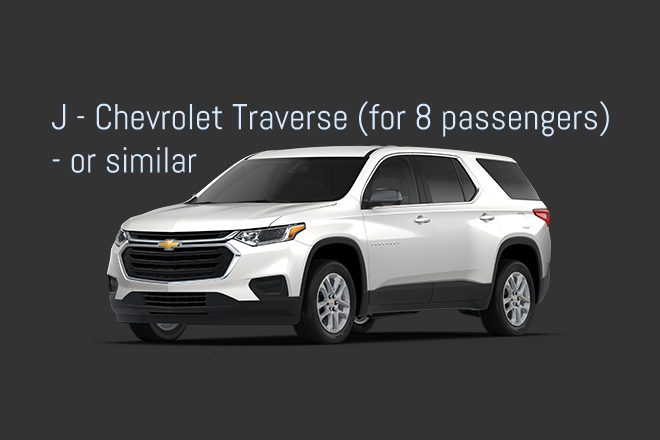
<style>
.page{position:relative;width:660px;height:440px;background:#333333}
.page>*{position:absolute;margin:0}
.t1{font:36px "Abel-Regular";color:#d5e9ff}
</style>
<div class="page">
<p class="t1" style="left:52px;top:100px;width:557px;height:73px">J - Chevrolet Traverse (for 8 passengers) - or similar</p>
</div>
